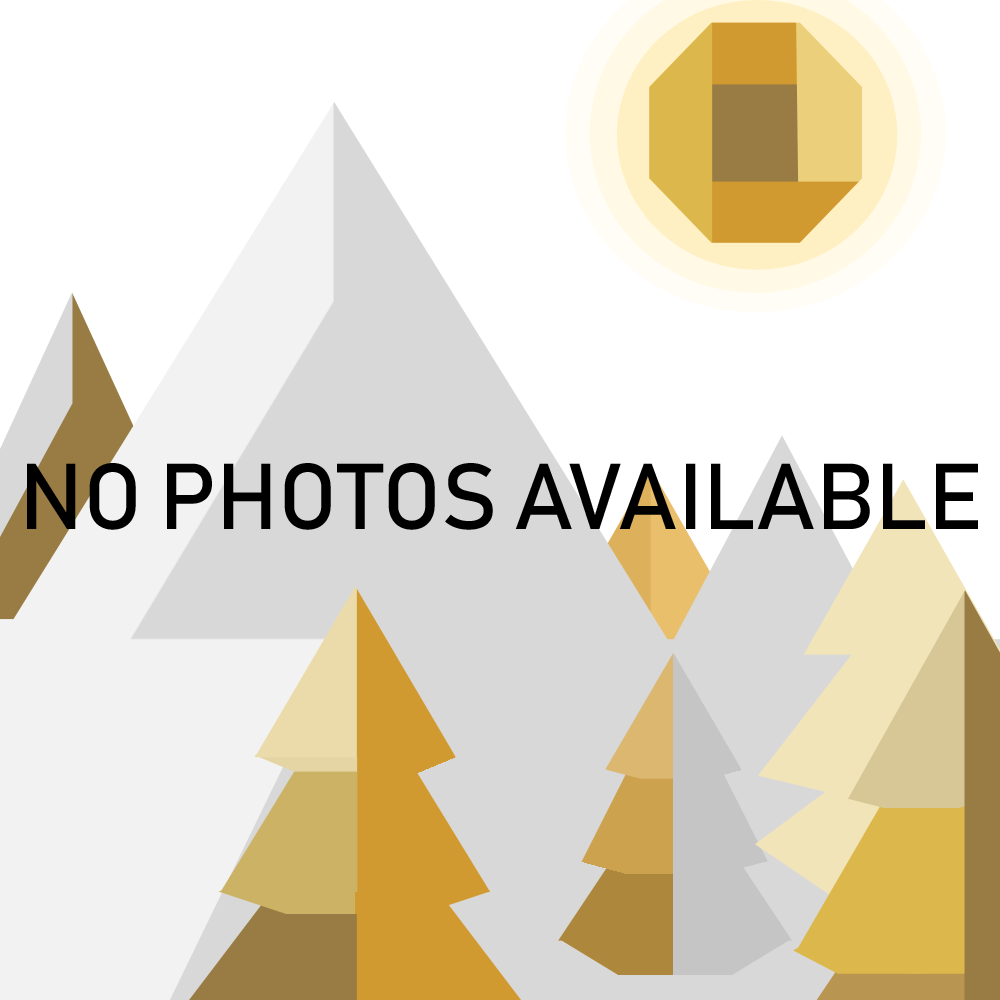
<style>
.page{position:relative;width:1000px;height:1000px;background:#ffffff}
.page>*{position:absolute;margin:0}
.t1{font:92px "Bahnschrift";color:#000000}
</style>
<div class="page">
<p class="t1" style="left:27px;top:463px;width:951px;height:67px">NO PHOTOS AVAILABLE</p>
</div>
